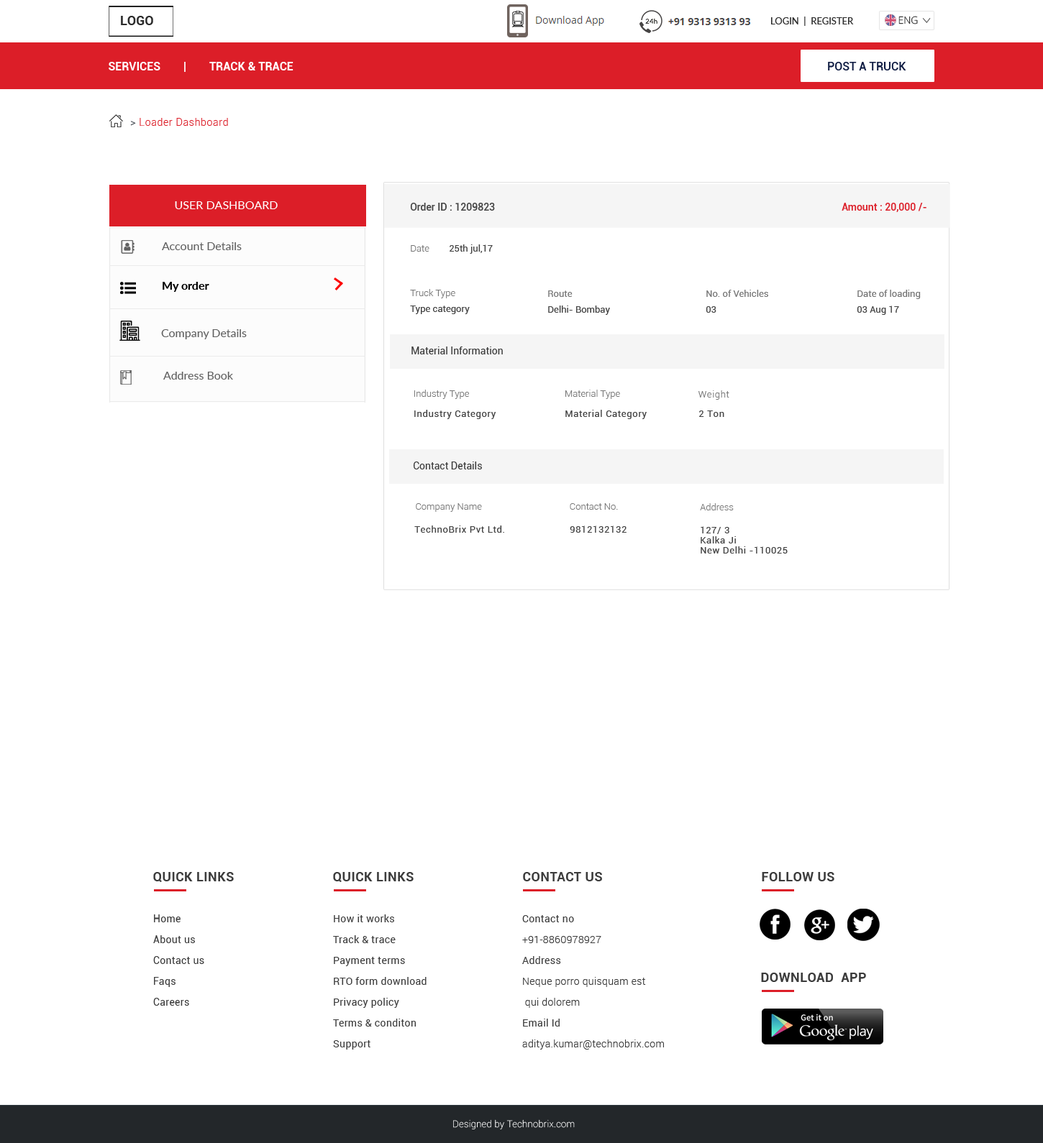
<style>
.page{position:relative;width:1043px;height:1143px;background:#ffffff}
.page>*{position:absolute;margin:0}
.t1{font:12.9px "Roboto-Bold";color:#2c2c2c}
.t2{font:9.3px "Lato-Regular";color:#2c2c2c;text-transform:uppercase}
.t3{font:10.1px "OpenSans-Light";color:#2c2c2c}
.t4{font:11.5px "Roboto-Bold";color:#ffffff;text-transform:uppercase}
.t5{font:11.5px "Roboto-Medium";color:#0d1a41}
.t6{font:10.1px "Roboto-Light";letter-spacing:0.05em;color:#dc1e28}
.t7{font:10.1px "Roboto-Light";letter-spacing:0.05em;color:#3f464e}
.t8{font:11.5px "Lato-Regular";color:#ffffff;text-transform:uppercase}
.t9{font:10.1px "Roboto-Medium";color:#444444}
.t10{font:10.1px "Roboto-Medium";color:#dc1e28}
.t11{font:11.5px "Lato-Regular";color:#606060}
.t12{font:9.3px "Roboto-Light";color:#777777}
.t13{font:9.3px "Roboto-Regular";color:#444444}
.t14{font:11.5px "Lato-Bold";color:#000000}
.t15{font:9.3px "Roboto-Regular";color:#777777}
.t16{font:10.1px "Roboto-Regular";color:#383838}
.t17{font:9.3px "Roboto-Light";letter-spacing:0.05em;color:#777777}
.t18{font:9.3px "Roboto-Regular";letter-spacing:0.05em;color:#444444}
.t19{font:9.3px/10.1px "Roboto-Regular";letter-spacing:0.05em;color:#444444}
.t20{font:12.9px "Roboto-Bold";letter-spacing:0.025em;color:#3c3c3c}
.t21{font:10.1px/20.9px "Roboto-Regular";letter-spacing:0.025em;color:#3c3c3c}
.t22{font:10.1px/20.9px "Roboto-Light";letter-spacing:0.025em;color:#3c3c3c}
.t23{font:9.3px "Roboto-Thin";letter-spacing:0.025em;color:#ffffff}
</style>
<div class="page">
<p class="t1" style="left:121px;top:16px;width:32px;height:9px">LOGO</p>
<p class="t2" style="left:771px;top:17px;width:83px;height:9px">Login  |  Register</p>
<p class="t3" style="left:898px;top:16px;width:20px;height:8px">ENG</p>
<p class="t4" style="left:109px;top:62px;width:184px;height:10px">Services        |        Track &amp; TraCe</p>
<p class="t5" style="left:828px;top:62px;width:78px;height:8px">POST A TRUCK</p>
<p class="t6" style="left:130px;top:118px;width:98px;height:8px"><span class="t7">&gt; </span>Loader Dashboard</p>
<p class="t8" style="left:175px;top:201px;width:103px;height:8px">User Dashboard</p>
<p class="t9" style="left:410px;top:203px;width:85px;height:8px">Order ID : 1209823</p>
<p class="t10" style="left:841px;top:203px;width:85px;height:9px">Amount : 20,000 /-</p>
<p class="t11" style="left:162px;top:242px;width:80px;height:8px">Account Details</p>
<p class="t12" style="left:411px;top:245px;width:18px;height:7px">Date</p>
<p class="t13" style="left:449px;top:245px;width:44px;height:9px">25th jul,17</p>
<p class="t14" style="left:163px;top:282px;width:46px;height:10px">My order</p>
<p class="t12" style="left:410px;top:289px;width:45px;height:9px">Truck Type</p>
<p class="t15" style="left:548px;top:291px;width:24px;height:6px">Route</p>
<p class="t15" style="left:706px;top:290px;width:62px;height:7px">No. of Vehicles</p>
<p class="t15" style="left:857px;top:290px;width:64px;height:9px">Date of loading</p>
<p class="t13" style="left:410px;top:306px;width:60px;height:8px">Type category</p>
<p class="t13" style="left:548px;top:306px;width:62px;height:9px">Delhi- Bombay</p>
<p class="t13" style="left:857px;top:306px;width:42px;height:9px">03 Aug 17</p>
<p class="t13" style="left:706px;top:306px;width:10px;height:7px">03</p>
<p class="t11" style="left:161px;top:329px;width:86px;height:10px">Company Details</p>
<p class="t16" style="left:411px;top:347px;width:92px;height:8px">Material Information</p>
<p class="t11" style="left:163px;top:372px;width:70px;height:8px">Address Book</p>
<p class="t12" style="left:414px;top:390px;width:55px;height:9px">Industry Type</p>
<p class="t12" style="left:565px;top:390px;width:55px;height:9px">Material Type</p>
<p class="t17" style="left:698px;top:391px;width:31px;height:9px">Weight</p>
<p class="t18" style="left:414px;top:410px;width:82px;height:9px">Industry Category</p>
<p class="t18" style="left:565px;top:410px;width:82px;height:9px">Material Category</p>
<p class="t18" style="left:699px;top:411px;width:25px;height:6px">2 Ton</p>
<p class="t16" style="left:413px;top:462px;width:69px;height:8px">Contact Details</p>
<p class="t12" style="left:416px;top:503px;width:66px;height:9px">Company Name</p>
<p class="t12" style="left:570px;top:503px;width:48px;height:7px">Contact No.</p>
<p class="t12" style="left:700px;top:503px;width:34px;height:8px">Address</p>
<p class="t18" style="left:414px;top:526px;width:90px;height:7px">TechnoBrix Pvt Ltd.</p>
<p class="t18" style="left:570px;top:526px;width:56px;height:7px">9812132132</p>
<p class="t19" style="left:700px;top:526px;width:87px;height:28px">127/ 3<br>Kalka Ji<br>New Delhi -110025</p>
<p class="t20" style="left:153px;top:872px;width:81px;height:10px">QUICK LINKS</p>
<p class="t20" style="left:333px;top:872px;width:81px;height:10px">QUICK LINKS</p>
<p class="t20" style="left:523px;top:872px;width:79px;height:10px">CONTACT US</p>
<p class="t20" style="left:762px;top:872px;width:72px;height:10px">FOLLOW US</p>
<p class="t21" style="left:153px;top:915px;width:51px;height:91px">Home<br>About us <br>Contact us<br>Faqs<br>Careers</p>
<p class="t21" style="left:333px;top:915px;width:93px;height:135px">How it works<br>Track &amp; trace<br>Payment terms<br>RTO form download<br>Privacy policy <br>Terms &amp; conditon<br>Support</p>
<p class="t22" style="left:522px;top:916px;width:142px;height:134px"><span class="t21">Contact no<br></span>+91-8860978927<br><span class="t21">Address<br></span>Neque porro quisquam est<br> qui dolorem<br><span class="t21">Email Id<br></span>aditya.kumar@technobrix.com</p>
<p class="t20" style="left:761px;top:973px;width:105px;height:9px">DOWNLOAD  APP</p>
<p class="t23" style="left:453px;top:1120px;width:122px;height:10px">Designed by Technobrix.com</p>
</div>
